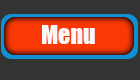
<style>
.page{position:relative;width:140px;height:80px;background:#333333}
.page>*{position:absolute;margin:0}
.t1{font:24px "Impact";color:#faf9f9}
</style>
<div class="page">
<p class="t1" style="left:42px;top:25px;width:53px;height:19px">Menu</p>
</div>
